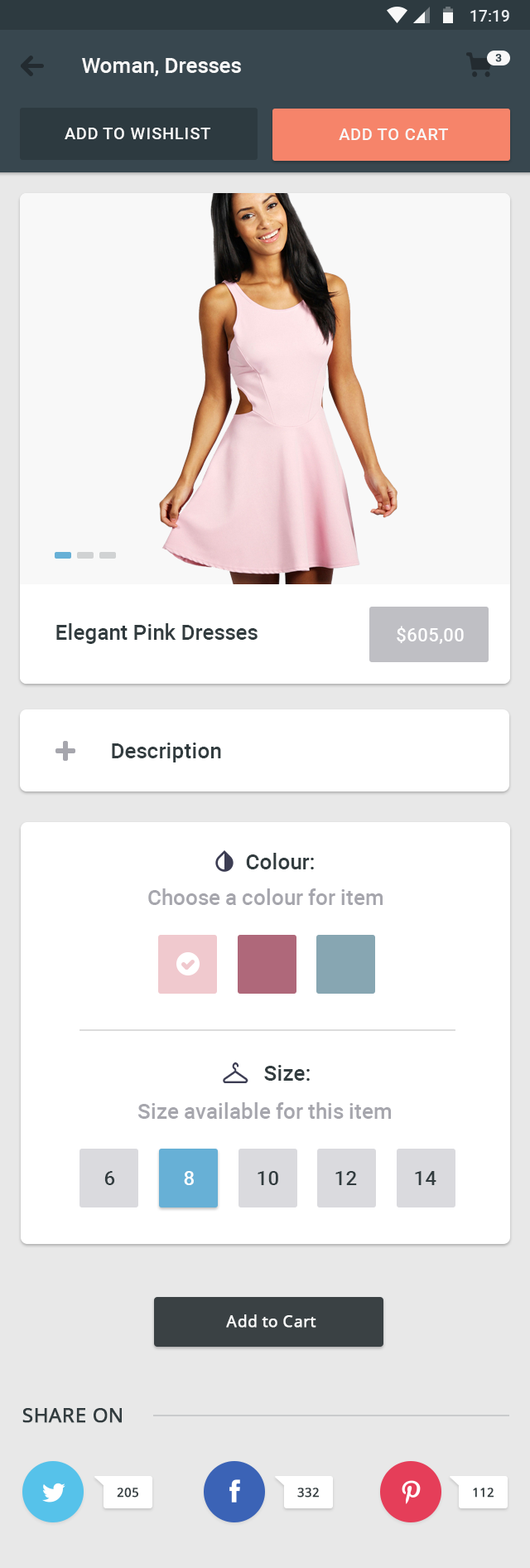
<style>
.page{position:relative;width:530px;height:1568px;background:#ffffff}
.page>*{position:absolute;margin:0}
.t1{font:15.7px "Roboto-Medium";color:#e8ecf0}
.t2{font:10.8px "Roboto-Medium";letter-spacing:0.04em;color:#38474f;text-transform:uppercase;font-weight:bold}
.t3{font:21.5px "Roboto-Medium";color:#f8f8f8}
.t4{font:16.6px "Roboto-Medium";letter-spacing:0.04em;color:#f8f8f8;text-transform:uppercase}
.t5{font:21.5px "Roboto-Medium";color:#323c3f}
.t6{font:18.2px "Roboto-Medium";color:#ffffff}
.t7{font:21.5px "Roboto-Medium";color:#a6a6ad}
.t8{font:19.9px "Roboto-Medium";color:#323c3f}
.t9{font:19.9px "Roboto-Medium";color:#ffffff}
.t10{font:15.7px "NotoSans";letter-spacing:0.015em;color:#f8f8f8;font-weight:bold}
.t11{font:19.9px "NotoSans";color:#323c3f;text-transform:uppercase;font-weight:bold}
.t12{font:12.4px "NotoSans";color:#323c3f;font-weight:bold}
</style>
<div class="page">
<p class="t1" style="left:471px;top:10px;width:39px;height:12px">17:19</p>
<p class="t2" style="left:496px;top:54px;width:6px;height:8px">3</p>
<p class="t3" style="left:82px;top:58px;width:159px;height:18px">Woman, Dresses</p>
<p class="t4" style="left:65px;top:128px;width:146px;height:11px">add to wishlist</p>
<p class="t4" style="left:339px;top:128px;width:109px;height:12px">add to cart</p>
<p class="t5" style="left:56px;top:623px;width:202px;height:21px">Elegant Pink Dresses</p>
<p class="t6" style="left:397px;top:626px;width:67px;height:18px">$605,00</p>
<p class="t5" style="left:112px;top:743px;width:109px;height:19px">Description</p>
<p class="t5" style="left:246px;top:853px;width:68px;height:16px">Colour:</p>
<p class="t7" style="left:148px;top:888px;width:235px;height:17px">Choose a colour for item</p>
<p class="t5" style="left:264px;top:1065px;width:46px;height:16px">Size:</p>
<p class="t7" style="left:138px;top:1102px;width:253px;height:17px">Size available for this item</p>
<p class="t8" style="left:104px;top:1171px;width:11px;height:14px">6</p>
<p class="t9" style="left:184px;top:1171px;width:10px;height:14px">8</p>
<p class="t8" style="left:258px;top:1171px;width:20px;height:14px">10</p>
<p class="t8" style="left:336px;top:1171px;width:21px;height:14px">12</p>
<p class="t8" style="left:415px;top:1171px;width:22px;height:14px">14</p>
<p class="t10" style="left:226px;top:1314px;width:91px;height:14px">Add to Cart</p>
<p class="t11" style="left:22px;top:1408px;width:100px;height:15px">share on</p>
<p class="t12" style="left:117px;top:1488px;width:22px;height:10px">205</p>
<p class="t12" style="left:298px;top:1488px;width:22px;height:10px">332</p>
<p class="t12" style="left:473px;top:1488px;width:22px;height:10px">112</p>
</div>
